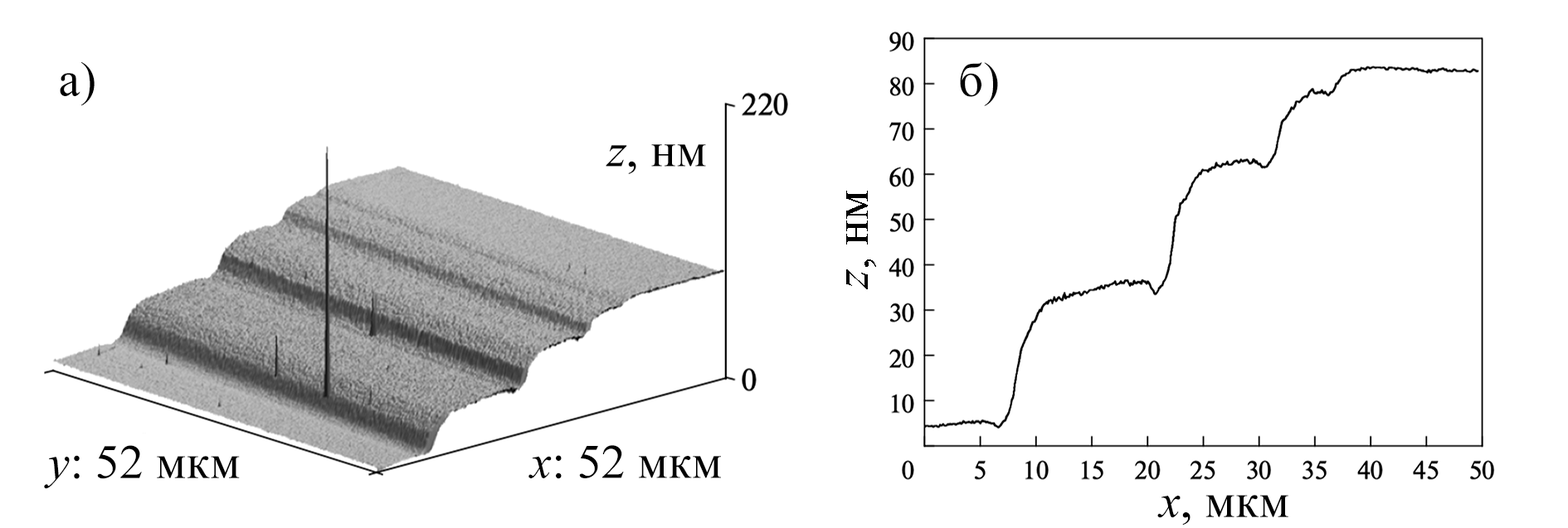
<style>
.page{position:relative;width:1568px;height:528px;background:#ffffff}
.page>*{position:absolute;margin:0}
.t1{font:48.4px "TimesNewRomanPSMT";color:#000000}
.t2{font:48.4px "TimesNewRomanPS-ItalicMT";color:#000000}
</style>
<div class="page">
<p class="t1" style="left:60px;top:61px;width:35px;height:45px">а)</p>
<p class="t1" style="left:960px;top:62px;width:38px;height:44px">б)</p>
<p class="t1" style="left:606px;top:144px;width:100px;height:30px"><span class="t2">z</span>, нм</p>
<p class="t1" style="left:846px;top:191px;width:30px;height:99px;rotate:-90deg"><span class="t2">z</span>, нм</p>
<p class="t1" style="left:44px;top:446px;width:196px;height:43px"><span class="t2">y</span>: 52 мкм</p>
<p class="t1" style="left:528px;top:446px;width:193px;height:34px"><span class="t2">x</span>: 52 мкм</p>
<p class="t1" style="left:1157px;top:495px;width:131px;height:31px"><span class="t2">x</span>, мкм</p>
</div>
